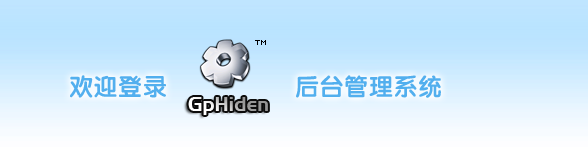
<style>
.page{position:relative;width:588px;height:147px}
.page>*{position:absolute;margin:0}
.t1{font:8px "04b08";letter-spacing:0.025em;color:#000000}
.t2{font:24px "FZY4JW--GB1-0";letter-spacing:0.025em;color:#52afee}
.t3{font:20.7px "HandelGothicEF-Bold"}
</style>
<div class="page">
<p class="t1" style="left:255px;top:40px;width:11px;height:5px">TM</p>
<p class="t2" style="left:70px;top:75px;width:96px;height:23px">欢迎登录</p>
<p class="t2" style="left:296px;top:75px;width:145px;height:23px">后台管理系统</p>
<p class="t3" style="left:188px;top:97px;width:80px;height:18px">GpHiden</p>
</div>
